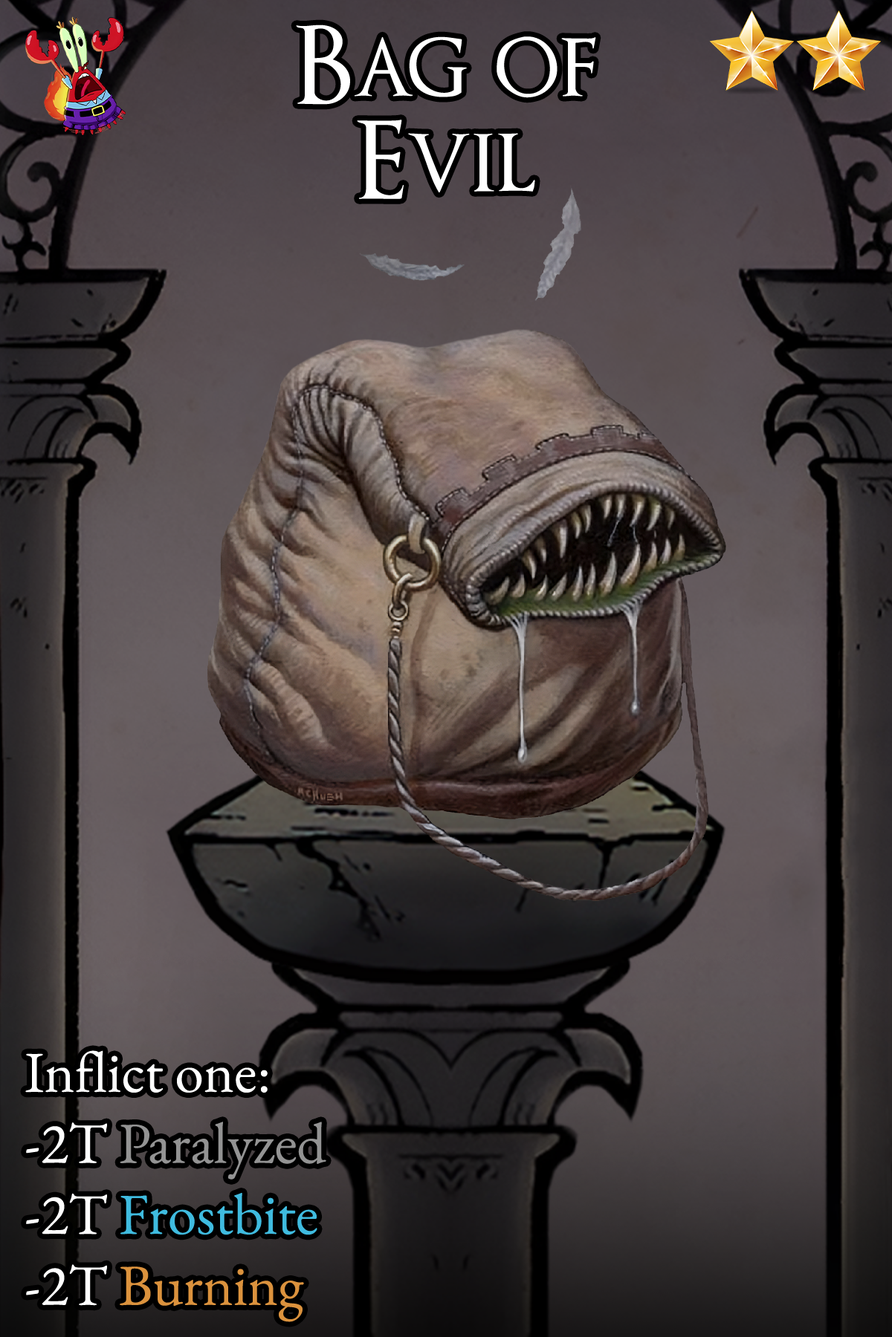
<style>
.page{position:relative;width:892px;height:1337px}
.page>*{position:absolute;margin:0}
.t1{font:180.5px/95.1px "OptimusPrinceps";color:#ffffff}
.t2{font:99.5px/71px "EBGaramond-Regular";color:#ffffff}
.t3{font:99.5px/71px "EBGaramond-Regular";color:#939393}
.t4{font:99.5px/71px "EBGaramond-Regular";color:#3fbbdf}
.t5{font:99.5px/71px "EBGaramond-Regular";color:#db923d}
</style>
<div class="page">
<p class="t1" style="left:296px;top:25px;width:300px;height:174px;text-align:center">Bag of<br>Evil</p>
<p class="t2" style="left:25px;top:1051px;width:301px;height:272px">Inflict one:<br>-2T <span class="t3">Paralyzed<br></span>-2T <span class="t4">Frostbite<br></span>-2T <span class="t5">Burning</span></p>
</div>
